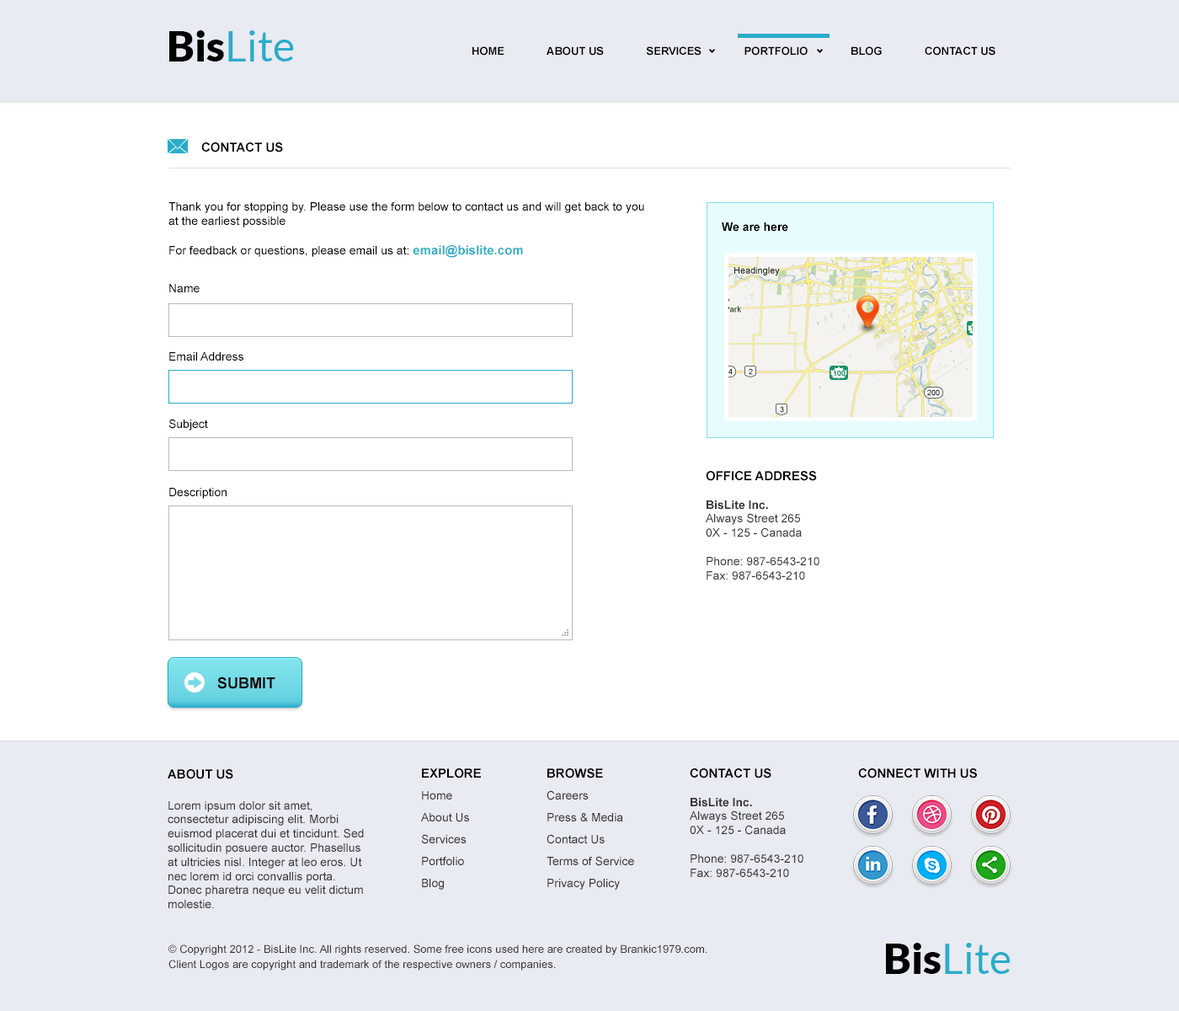
<style>
.page{position:relative;width:1179px;height:1011px;background:#ffffff}
.page>*{position:absolute;margin:0}
.t1{font:42.1px "Lato-Regular";color:#2aacc8}
.t2{font:42.1px "Lato-Black";color:#000000}
.t3{font:11px "Arial-BoldMT";color:#000000;text-transform:uppercase}
.t4{font:12.6px "Arial-BoldMT";color:#000000;text-transform:uppercase}
.t5{font:11.8px "ArialMT";color:#000000}
.t6{font:12.6px "Arial-BoldMT";color:#2aacc8}
.t7{font:11.8px "Arial-BoldMT";color:#000000}
.t8{font:11.8px "ArialMT";color:#363636}
.t9{font:11.8px "Arial-BoldMT";color:#363636}
.t10{font:15.2px "Arial-BoldMT";color:#0d0707;text-transform:uppercase}
.t11{font:12.6px/16.8px "Arial-BoldMT";color:#000000;text-transform:uppercase}
.t12{font:11.8px/21.9px "ArialMT";color:#363636}
.t13{font:11px/15.2px "ArialMT";color:#363636}
</style>
<div class="page">
<p class="t1" style="left:169px;top:30px;width:125px;height:32px"><span class="t2">Bis</span>Lite</p>
<p class="t3" style="left:473px;top:46px;width:523px;height:10px">Home              About Us              Services              Portfolio              Blog              Contact Us</p>
<p class="t4" style="left:201px;top:142px;width:82px;height:10px">contact us</p>
<p class="t5" style="left:168px;top:202px;width:477px;height:56px">Thank you for stopping by. Please use the form below to contact us and will get back to you at the earliest possible<br><br>For feedback or questions, please email us at: <span class="t6">email@bislite.com</span></p>
<p class="t7" style="left:722px;top:222px;width:67px;height:10px">We are here</p>
<p class="t5" style="left:169px;top:284px;width:31px;height:8px">Name</p>
<p class="t5" style="left:169px;top:352px;width:74px;height:9px">Email Address</p>
<p class="t5" style="left:168px;top:419px;width:40px;height:12px">Subject</p>
<p class="t8" style="left:706px;top:471px;width:114px;height:109px"><span class="t4">Office Address<br><br></span><span class="t9">BisLite Inc.<br></span>Always Street 265<br>0X - 125 - Canada<br><br>Phone: 987-6543-210<br>Fax: 987-6543-210</p>
<p class="t5" style="left:169px;top:488px;width:58px;height:11px">Description</p>
<p class="t10" style="left:217px;top:677px;width:58px;height:12px">Submit</p>
<p class="t8" style="left:168px;top:769px;width:196px;height:139px"><span class="t11">About us<br><br></span>Lorem ipsum dolor sit amet, consectetur adipiscing elit. Morbi euismod placerat dui et tincidunt. Sed sollicitudin posuere auctor. Phasellus at ultricies nisl. Integer at leo eros. Ut nec lorem id orci convallis porta. Donec pharetra neque eu velit dictum molestie.</p>
<p class="t12" style="left:421px;top:768px;width:60px;height:122px"><span class="t11">Explore<br></span>Home<br>About Us<br>Services<br>Portfolio<br>Blog</p>
<p class="t12" style="left:547px;top:768px;width:87px;height:122px"><span class="t11">Browse<br></span>Careers<br>Press &amp; Media<br>Contact Us<br>Terms of Service<br>Privacy Policy</p>
<p class="t8" style="left:690px;top:768px;width:114px;height:109px"><span class="t4">contact us<br><br></span><span class="t9">BisLite Inc.<br></span>Always Street 265<br>0X - 125 - Canada<br><br>Phone: 987-6543-210<br>Fax: 987-6543-210</p>
<p class="t4" style="left:858px;top:768px;width:119px;height:10px">connect with us</p>
<p class="t13" style="left:168px;top:944px;width:540px;height:27px">© Copyright 2012 - BisLite Inc. All rights reserved. Some free icons used here are created by Brankic1979.com. <br>Client Logos are copyright and trademark of the respective owners / companies.</p>
<p class="t1" style="left:886px;top:943px;width:125px;height:31px"><span class="t2">Bis</span>Lite</p>
</div>
